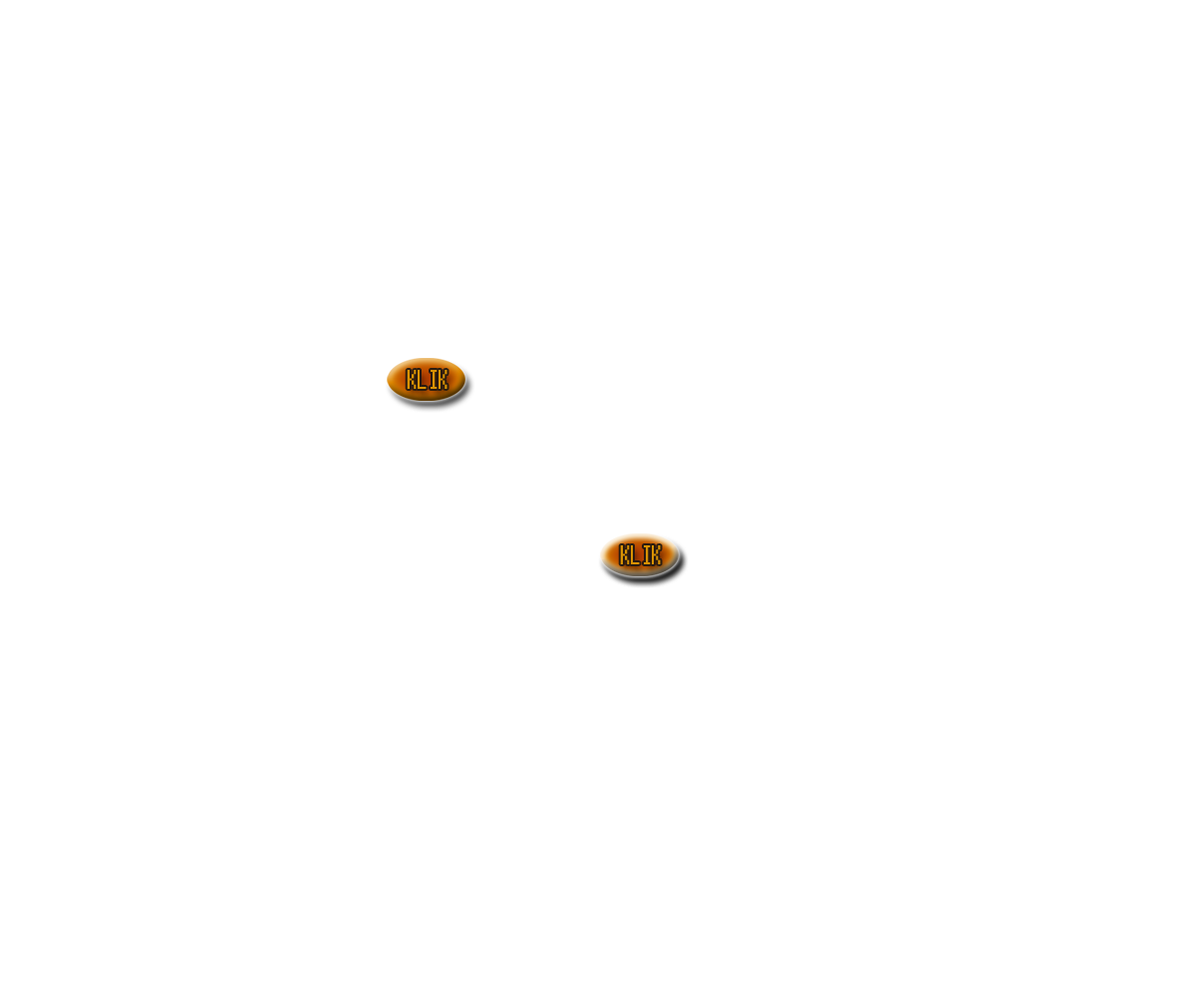
<style>
.page{position:relative;width:1196px;height:997px;background:#ffffff}
.page>*{position:absolute;margin:0}
.t1{font:27px "Terminal";color:#d99203}
</style>
<div class="page">
<p class="t1" style="left:620px;top:545px;width:41px;height:19px">KLIK</p>
</div>
